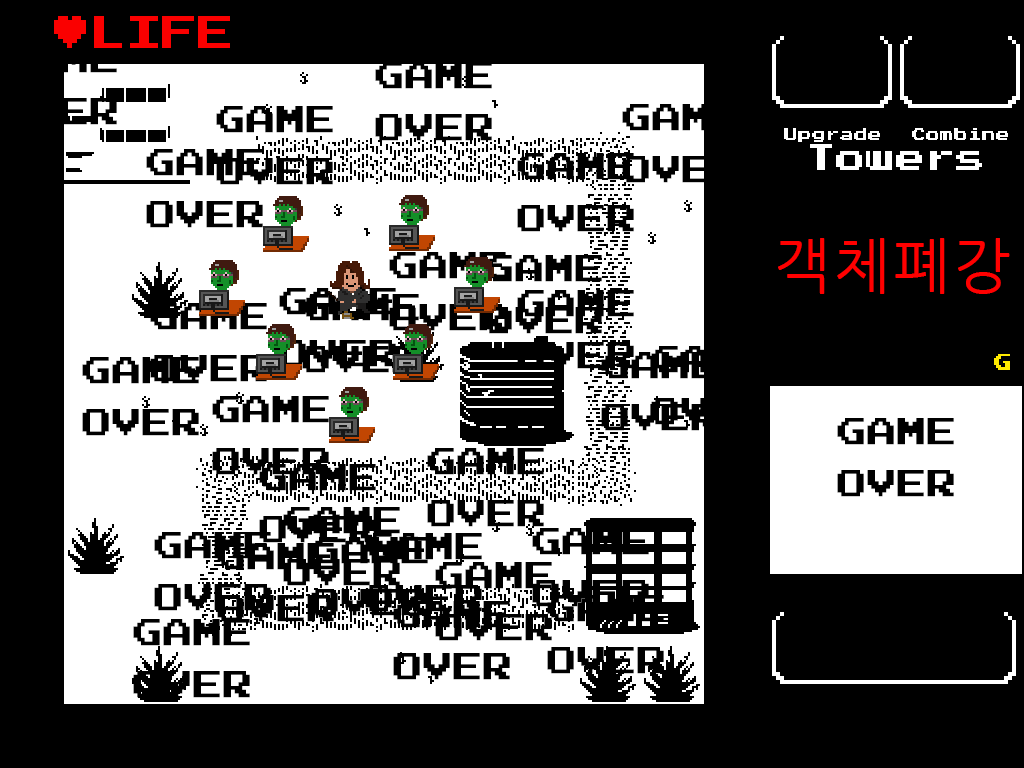
<style>
.page{position:relative;width:1024px;height:768px;background:#000000}
.page>*{position:absolute;margin:0}
.t1{font:36px "PressStart2P";color:#fa0000}
.t2{font:30px "PressStart2P";color:#000000}
.t3{font:30px "PressStart2P";color:#ffffff}
.t4{font:60px "NanumGothicCoding";color:#ff0000}
.t5{font:18px "PressStart2P";color:#ffea00}
</style>
<div class="page">
<p class="t1" style="left:54px;top:16px;width:176px;height:32px">♥LIFE</p>
<p class="t2" style="left:0px;top:46px;width:117px;height:79px">GAME<br>OVER</p>
<p class="t2" style="left:375px;top:62px;width:117px;height:79px">GAME<br>OVER</p>
<p class="t2" style="left:216px;top:106px;width:117px;height:79px">GAME<br>OVER</p>
<p class="t2" style="left:622px;top:104px;width:117px;height:79px">GAME<br>OVER</p>
<p class="t2" style="left:146px;top:149px;width:117px;height:79px">GAME<br>OVER</p>
<p class="t3" style="left:810px;top:144px;width:172px;height:26px">Towers</p>
<p class="t2" style="left:517px;top:153px;width:117px;height:79px">GAME<br>OVER</p>
<p class="t4" style="left:778px;top:238px;width:232px;height:56px">객체폐강</p>
<p class="t2" style="left:389px;top:252px;width:117px;height:79px">GAME<br>OVER</p>
<p class="t2" style="left:485px;top:255px;width:117px;height:79px">GAME<br>OVER</p>
<p class="t2" style="left:279px;top:288px;width:117px;height:79px">GAME<br>OVER</p>
<p class="t2" style="left:302px;top:294px;width:117px;height:79px">GAME<br>OVER</p>
<p class="t2" style="left:517px;top:290px;width:117px;height:79px">GAME<br>OVER</p>
<p class="t2" style="left:150px;top:303px;width:117px;height:79px">GAME<br>OVER</p>
<p class="t2" style="left:601px;top:352px;width:117px;height:79px">GAME<br>OVER</p>
<p class="t2" style="left:651px;top:346px;width:117px;height:79px">GAME<br>OVER</p>
<p class="t2" style="left:82px;top:357px;width:117px;height:79px">GAME<br>OVER</p>
<p class="t5" style="left:994px;top:354px;width:16px;height:16px">G</p>
<p class="t2" style="left:212px;top:396px;width:117px;height:79px">GAME<br>OVER</p>
<p class="t2" style="left:837px;top:418px;width:117px;height:79px">GAME<br>OVER</p>
<p class="t2" style="left:427px;top:448px;width:117px;height:79px">GAME<br>OVER</p>
<p class="t2" style="left:259px;top:464px;width:117px;height:79px">GAME<br>OVER</p>
<p class="t2" style="left:283px;top:507px;width:117px;height:79px">GAME<br>OVER</p>
<p class="t2" style="left:154px;top:532px;width:117px;height:79px">GAME<br>OVER</p>
<p class="t2" style="left:365px;top:533px;width:117px;height:79px">GAME<br>OVER</p>
<p class="t2" style="left:532px;top:528px;width:117px;height:79px">GAME<br>OVER</p>
<p class="t2" style="left:217px;top:543px;width:117px;height:79px">GAME<br>OVER</p>
<p class="t2" style="left:311px;top:537px;width:117px;height:79px">GAME<br>OVER</p>
<p class="t2" style="left:435px;top:562px;width:117px;height:79px">GAME<br>OVER</p>
<p class="t2" style="left:393px;top:601px;width:117px;height:79px">GAME<br>OVER</p>
<p class="t2" style="left:547px;top:595px;width:117px;height:79px">GAME<br>OVER</p>
<p class="t2" style="left:133px;top:619px;width:117px;height:79px">GAME<br>OVER</p>
</div>
